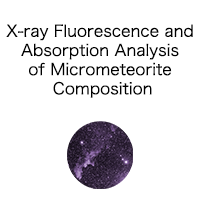
<style>
.page{position:relative;width:200px;height:200px;background:#ffffff}
.page>*{position:absolute;margin:0}
.t1{font:16px "HiraKakuPro-W3";color:#000000}
</style>
<div class="page">
<p class="t1" style="left:6px;top:24px;width:187px;height:74px;text-align:center">X-ray Fluorescence and <br>Absorption Analysis <br>of Micrometeorite <br>Composition</p>
</div>
